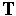
<style>
.page{position:relative;width:16px;height:16px;background:#ffffff}
.page>*{position:absolute;margin:0}
.t1{font:18px "Times-Bold";color:#000000}
</style>
<div class="page">
<p class="t1" style="left:3px;top:2px;width:11px;height:13px">T</p>
</div>
